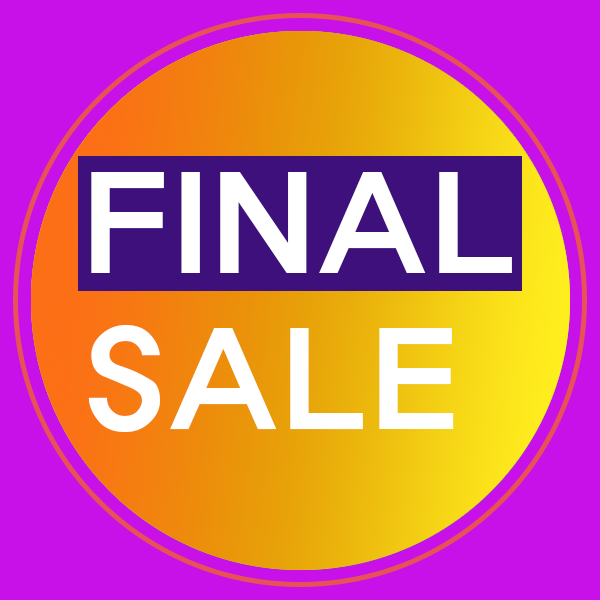
<style>
.page{position:relative;width:600px;height:600px;background:#c810e8}
.page>*{position:absolute;margin:0}
.t1{font:129.4px "ExpoM-HM";letter-spacing:0.05em;color:#ffffff}
</style>
<div class="page">
<p class="t1" style="left:88px;top:172px;width:424px;height:260px">FINAL<br>SALE</p>
</div>
